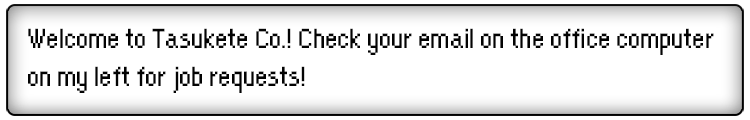
<style>
.page{position:relative;width:750px;height:120px;background:#ffffff}
.page>*{position:absolute;margin:0}
.t1{font:32px "OrangeKid-Regular";color:#030303}
</style>
<div class="page">
<p class="t1" style="left:28px;top:28px;width:686px;height:65px">Welcome to Tasukete Co.! Check your email on the office computer <br>on my left for job requests!</p>
</div>
